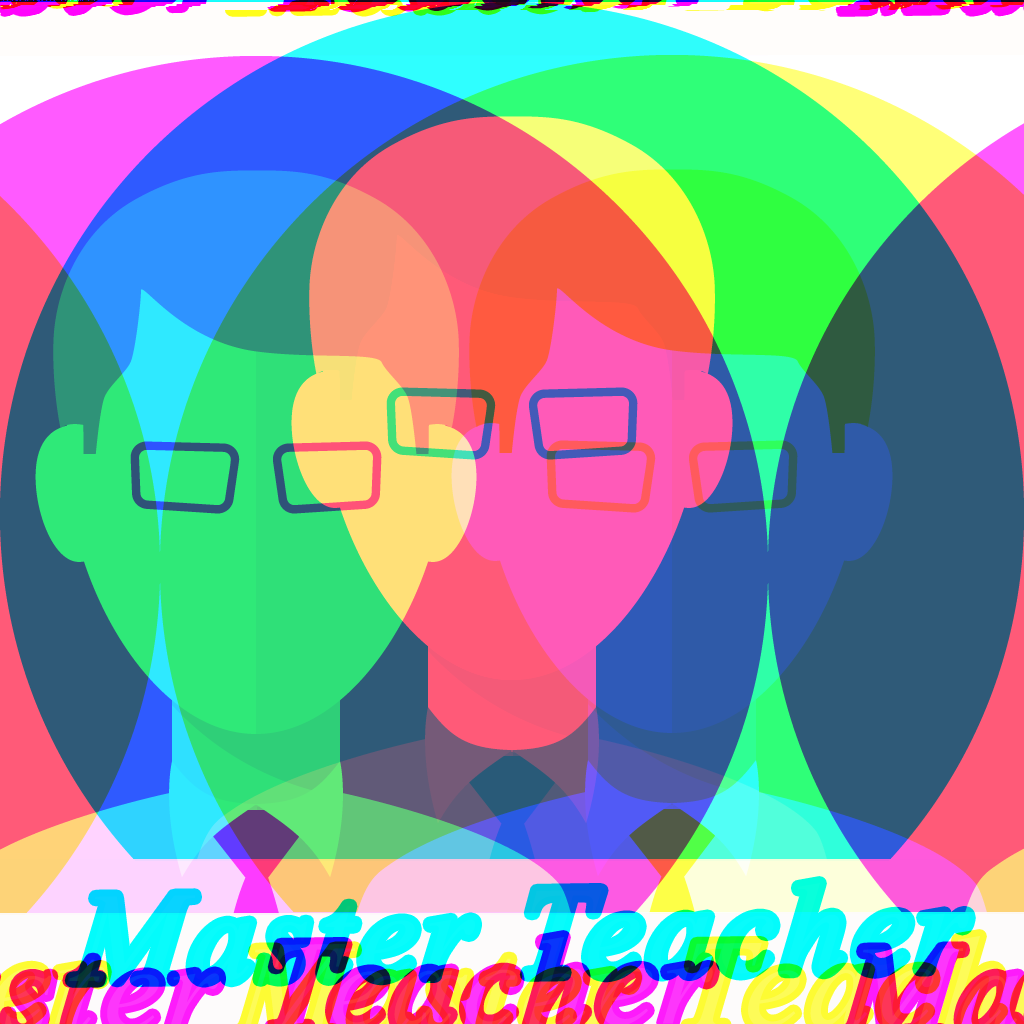
<style>
.page{position:relative;width:1024px;height:1024px}
.page>*{position:absolute;margin:0}
.t1{font:126.2px "TimesNewRomanPS-ItalicMT";letter-spacing:0.05em}
</style>
<div class="page">
<p class="t1" style="left:71px;top:881px;width:898px;height:98px;rotate:-1deg">Master Teacher</p>
</div>
